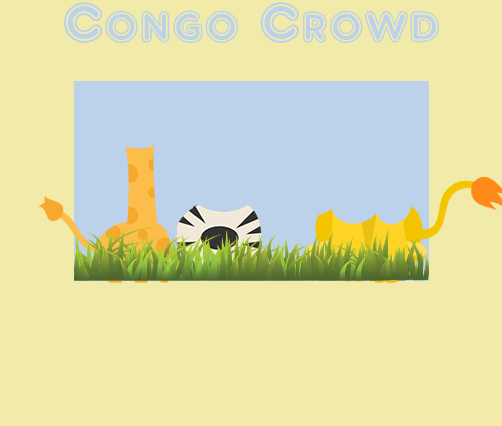
<style>
.page{position:relative;width:502px;height:426px;background:#f1eaa8}
.page>*{position:absolute;margin:0}
.t1{font:58.3px "ARDELANEY";color:#bcd2ea}
</style>
<div class="page">
<p class="t1" style="left:64px;top:2px;width:375px;height:41px">Congo Crowd</p>
</div>
